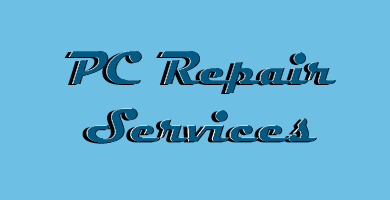
<style>
.page{position:relative;width:390px;height:200px;background:#6ebfe4}
.page>*{position:absolute;margin:0}
.t1{font:48px "Magneto-Bold"}
</style>
<div class="page">
<p class="t1" style="left:64px;top:52px;width:268px;height:92px;text-align:center">PC Repair <br>Services</p>
</div>
